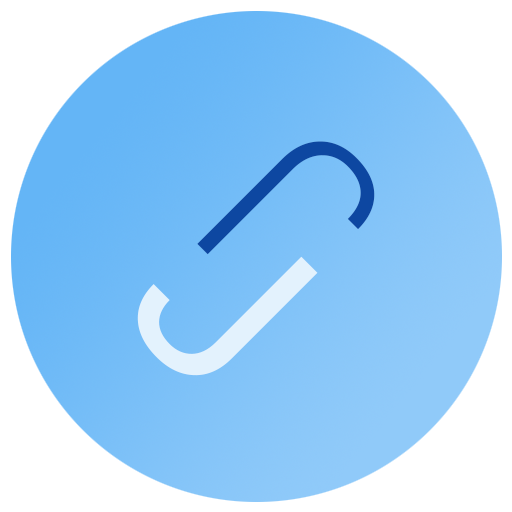
<style>
.page{position:relative;width:512px;height:512px;background:#ffffff}
.page>*{position:absolute;margin:0}
.t1{font:240.2px "Roboto-Light";color:#0d47a1}
.t2{font:240px "Roboto-Regular";color:#e3f2fd}
</style>
<div class="page">
<p class="t1" style="left:197px;top:141px;width:178px;height:114px;rotate:-135deg">J</p>
<p class="t2" style="left:137px;top:256px;width:181px;height:120px;rotate:45deg">J</p>
</div>
